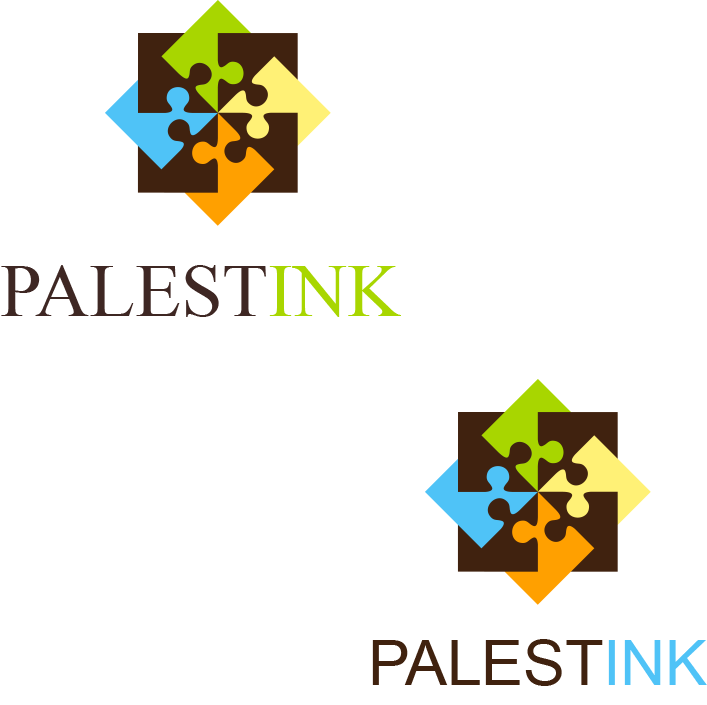
<style>
.page{position:relative;width:707px;height:705px;background:#ffffff}
.page>*{position:absolute;margin:0}
.t1{font:75px "ErasITC-Bold";color:#3e2723}
.t2{font:75px "ErasITC-Bold";color:#a8d600}
.t3{font:62.5px "ArialMT";color:#40220f}
.t4{font:62.5px "ArialMT";color:#4fc3f7}
</style>
<div class="page">
<p class="t1" style="left:1px;top:265px;width:400px;height:52px">PALEST<span class="t2">INK</span></p>
<p class="t3" style="left:372px;top:639px;width:335px;height:47px">PALEST<span class="t4">INK</span></p>
</div>
